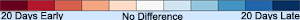
<style>
.page{position:relative;width:300px;height:20px}
.page>*{position:absolute;margin:0}
.t1{font:10px "ArialMT";color:#000000}
</style>
<div class="page">
<p class="t1" style="left:1px;top:11px;width:63px;height:11px">20 Days Early</p>
<p class="t1" style="left:122px;top:12px;width:61px;height:9px">No Difference</p>
<p class="t1" style="left:241px;top:11px;width:59px;height:11px">20 Days Late</p>
</div>
